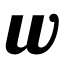
<style>
.page{position:relative;width:64px;height:64px;background:#ffffff}
.page>*{position:absolute;margin:0}
.t1{font:78.2px "Lobster1.3";color:#000000}
</style>
<div class="page">
<p class="t1" style="left:5px;top:13px;width:54px;height:42px">w</p>
</div>
